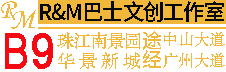
<style>
.page{position:relative;width:226px;height:72px;background:#ffffff}
.page>*{position:absolute;margin:0}
.t1{font:22px "DreamHanSansCN-W18";letter-spacing:-0.05em;color:#08090b;scale:0.97 1}
.t2{font:22px "DreamHanSansCN-W18";letter-spacing:-0.01em;color:#08090b;scale:0.97 1}
.t3{font:22px "DreamHanSansCN-W18";color:#08090b;scale:0.97 1}
.t4{font:48px "ArialMT";letter-spacing:-0.075em;color:#f30a12;font-weight:bold;scale:0.81 1}
.t5{font:48px "ArialMT";letter-spacing:-0.075em;color:#f30a12;font-weight:bold;scale:0.9 1}
.t6{font:18px "STZhongsong";letter-spacing:-0.075em;color:#f1b73b}
.t7{font:18px "STZhongsong";letter-spacing:-0.05em;color:#f1b73b}
.t8{font:20px/1px "DreamHanSansCN-W16";letter-spacing:-0.01em;color:#f1b73b}
.t9{font:16px "STZhongsong";letter-spacing:-0.01em;color:#f1b73b}
.t10{font:18px "STZhongsong";letter-spacing:0.23em;color:#f1b73b}
</style>
<div class="page">
<p class="t1" style="left:40px;top:1px;width:184px;height:21px">R&amp;M巴士文创工<span class="t2">作</span><span class="t3">室</span></p>
<p class="t4" style="left:5px;top:33px;width:22px;height:36px">B</p>
<p class="t5" style="left:32px;top:33px;width:21px;height:36px">9</p>
<p class="t6" style="left:57px;top:32px;width:83px;height:17px">珠<span class="t7">江</span>南景园</p>
<p class="t8" style="left:143px;top:31px;width:18px;height:37px;text-align:center">途经</p>
<p class="t9" style="left:164px;top:32px;width:61px;height:15px">中山大道</p>
<p class="t10" style="left:58px;top:52px;width:82px;height:17px">华景新城</p>
<p class="t9" style="left:163px;top:53px;width:62px;height:15px">广州大道</p>
</div>
